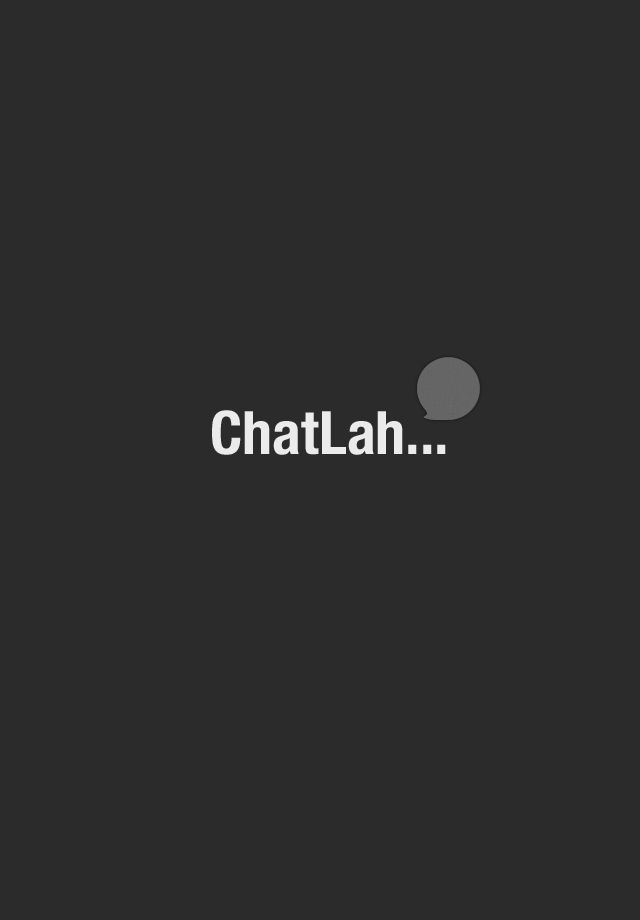
<style>
.page{position:relative;width:640px;height:920px;background:#2b2b2b}
.page>*{position:absolute;margin:0}
.t1{font:60px "HelveticaNeue-CondensedBold";color:#ebebeb}
</style>
<div class="page">
<p class="t1" style="left:212px;top:410px;width:234px;height:45px">ChatLah...</p>
</div>
